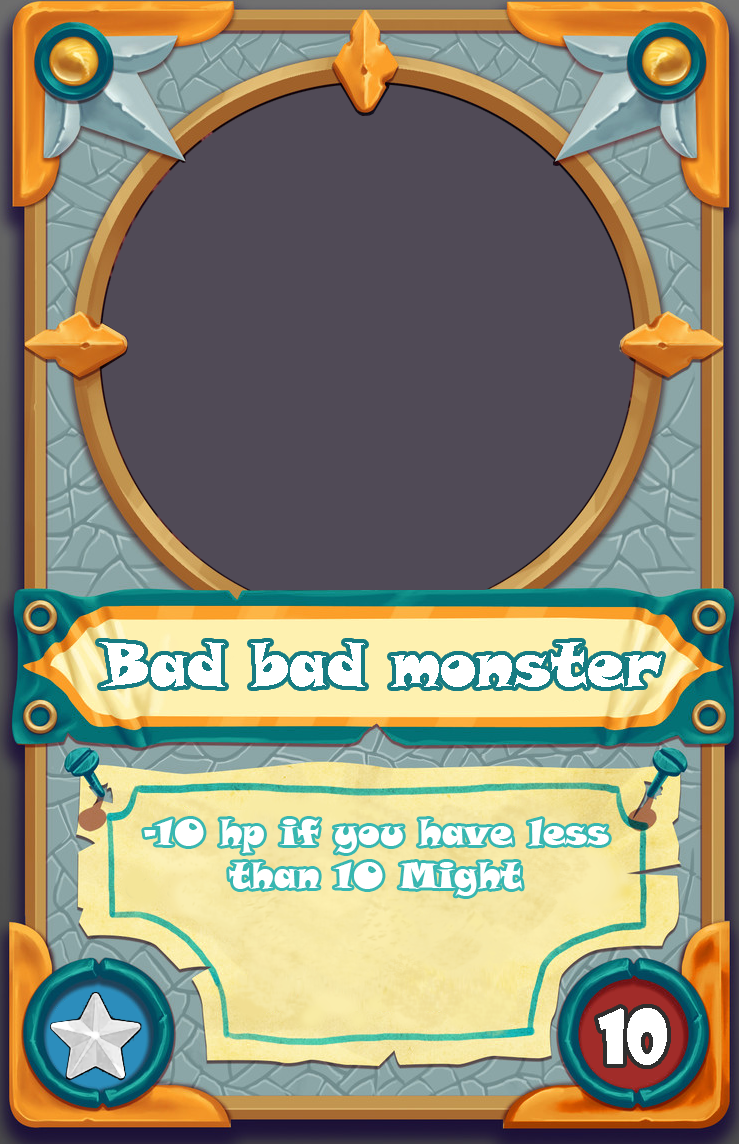
<style>
.page{position:relative;width:739px;height:1144px;background:#504a56}
.page>*{position:absolute;margin:0}
.t1{font:60px "SnapITC-Regular";color:#ffffff}
.t2{font:36px "SnapITC-Regular";color:#ffffff}
.t3{font:72px "ShowcardGothic-Reg";color:#ffffff}
</style>
<div class="page">
<p class="t1" style="left:99px;top:642px;width:563px;height:45px">Bad bad monster</p>
<p class="t2" style="left:144px;top:819px;width:465px;height:77px;text-align:center">-10 hp if you have less <br>than 10 Might</p>
<p class="t3" style="left:598px;top:1008px;width:69px;height:57px">10</p>
</div>
